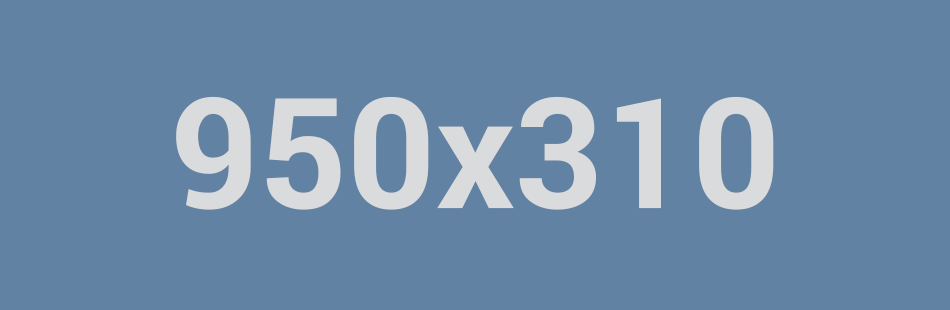
<style>
.page{position:relative;width:950px;height:310px;background:#6282a3}
.page>*{position:absolute;margin:0}
.t1{font:154.3px "Roboto-Bold";color:#dadbdc}
</style>
<div class="page">
<p class="t1" style="left:176px;top:96px;width:598px;height:114px">950x310</p>
</div>
